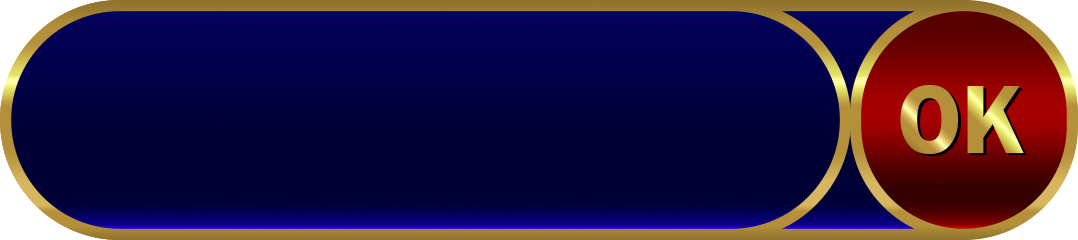
<style>
.page{position:relative;width:1078px;height:240px}
.page>*{position:absolute;margin:0}
.t1{font:101.2px "FranklinGothic-Demi"}
</style>
<div class="page">
<p class="t1" style="left:900px;top:85px;width:124px;height:69px">OK</p>
</div>
